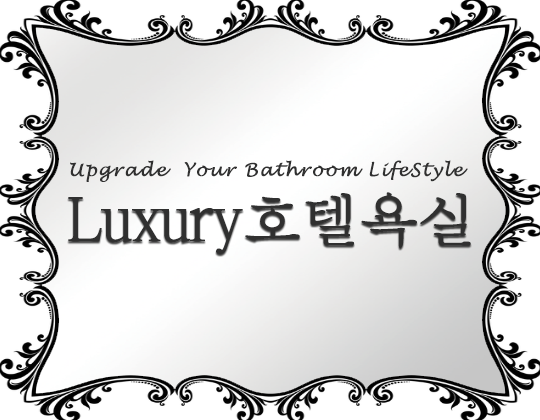
<style>
.page{position:relative;width:540px;height:420px;background:#ffffff}
.page>*{position:absolute;margin:0}
.t1{font:18px "LucidaHandwriting-Italic";letter-spacing:0.065em;color:#303030;font-weight:bold}
.t2{font:60px "ÈÞ¸Õ¸íÁ¶";letter-spacing:-0.055em;color:#303030;font-weight:bold}
</style>
<div class="page">
<p class="t1" style="left:70px;top:160px;width:398px;height:22px">Upgrade  Your Bathroom LifeStyle</p>
<p class="t2" style="left:68px;top:192px;width:403px;height:62px">Luxury호텔욕실</p>
</div>
